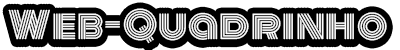
<style>
.page{position:relative;width:400px;height:50px;background:#ffffff}
.page>*{position:absolute;margin:0}
.t1{font:36px "Monoton-Regular";letter-spacing:0.025em}
.t2{font:36px "Monoton-Regular";letter-spacing:0.025em;color:#ffffff}
</style>
<div class="page">
<p class="t1" style="left:8px;top:10px;width:379px;height:36px">Web-Quadrinho</p>
<p class="t2" style="left:8px;top:8px;width:379px;height:36px">Web-Quadrinho</p>
</div>
